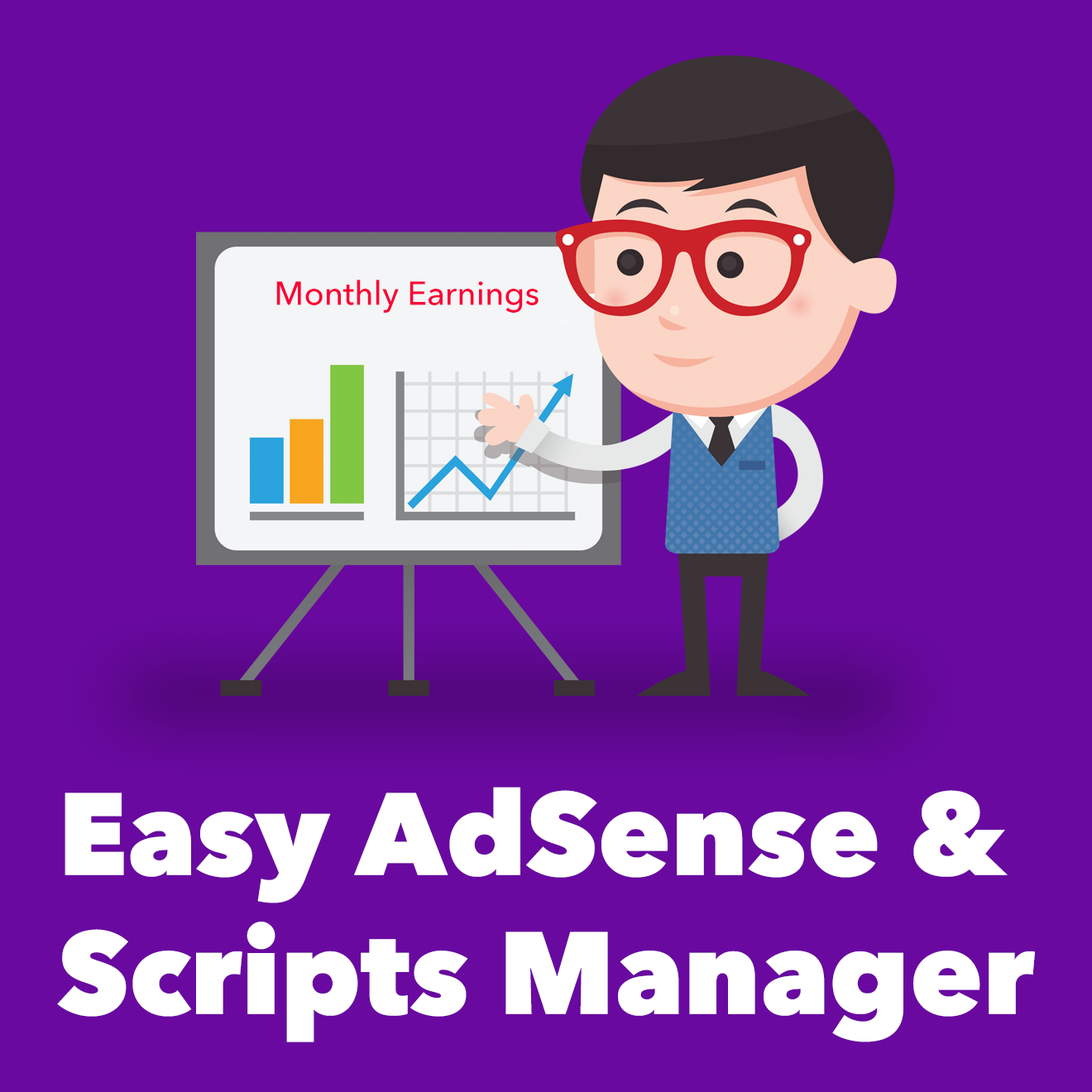
<style>
.page{position:relative;width:1092px;height:1092px;background:#6909a0}
.page>*{position:absolute;margin:0}
.t1{font:33.1px "AvenirNext-Medium";color:#fa0036}
.t2{font:115.8px "AvenirNext-Heavy";color:#ffffff}
</style>
<div class="page">
<p class="t1" style="left:276px;top:280px;width:263px;height:33px">Monthly Earnings</p>
<p class="t2" style="left:57px;top:787px;width:978px;height:255px">Easy AdSense &amp; <br>Scripts Manager</p>
</div>
